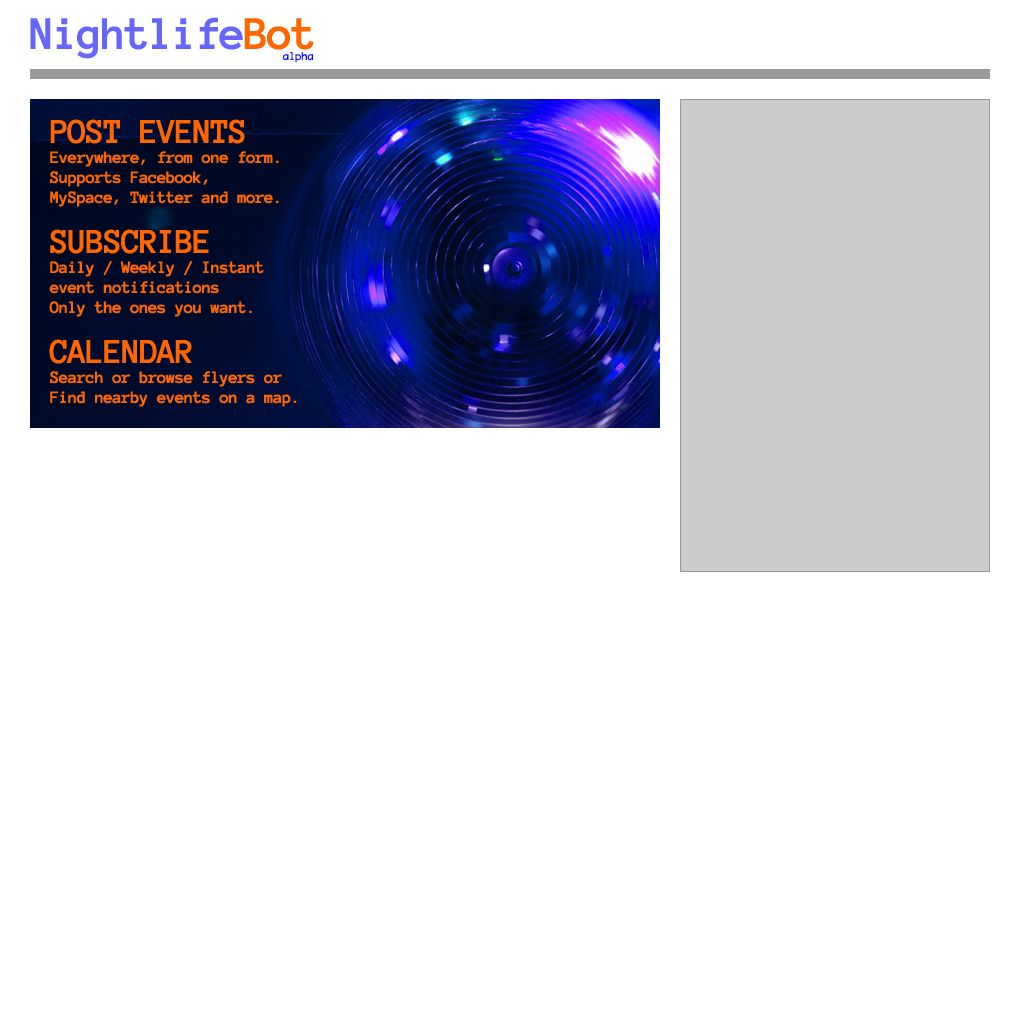
<style>
.page{position:relative;width:1020px;height:1020px;background:#ffffff}
.page>*{position:absolute;margin:0}
.t1{font:48px "AnonymousPro-Bold";letter-spacing:-0.05em;color:#6666ff}
.t2{font:48px "AnonymousPro-Bold";letter-spacing:-0.05em;color:#ff6600}
.t3{font:10px "Anonymous";letter-spacing:-0.05em;color:#0000ff}
.t4{font:18px/20px "AnonymousPro-Bold";letter-spacing:-0.05em;color:#ff6600}
.t5{font:36px/14.5px "AnonymousPro-Bold";letter-spacing:-0.05em;color:#ff6600}
</style>
<div class="page">
<p class="t1" style="left:30px;top:17px;width:284px;height:42px">Nightlife<span class="t2">Bot</span></p>
<p class="t3" style="left:283px;top:52px;width:30px;height:11px">alpha</p>
<p class="t4" style="left:50px;top:119px;width:229px;height:88px"><span class="t5">POST EVENTS<br></span>Everywhere, from one form.<br>Supports Facebook,<br>MySpace, Twitter and more.</p>
<p class="t4" style="left:49px;top:229px;width:215px;height:88px"><span class="t5">SUBSCRIBE<br></span>Daily / Weekly / Instant<br>event notifications<br>Only the ones you want.</p>
<p class="t4" style="left:49px;top:339px;width:248px;height:68px"><span class="t5">CALENDAR<br></span>Search or browse flyers or<br>Find nearby events on a map.</p>
</div>
